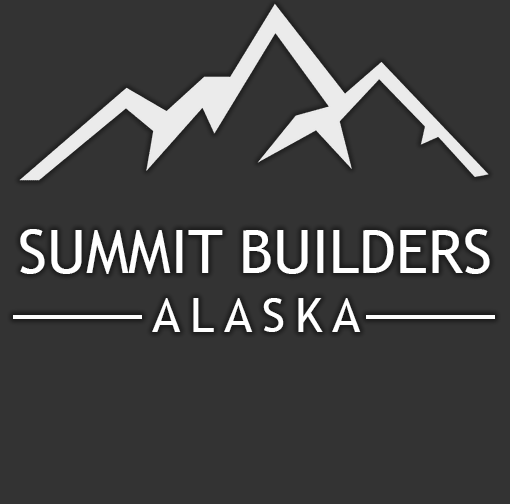
<style>
.page{position:relative;width:510px;height:504px;background:#333333}
.page>*{position:absolute;margin:0}
.t1{font:60px "TrebuchetMS";color:#ffffff}
.t2{font:48px "TrebuchetMS";letter-spacing:0.2em;color:#ffffff}
</style>
<div class="page">
<p class="t1" style="left:20px;top:229px;width:470px;height:45px">SUMMIT BUILDERS</p>
<p class="t2" style="left:152px;top:298px;width:209px;height:34px">ALASKA</p>
</div>
